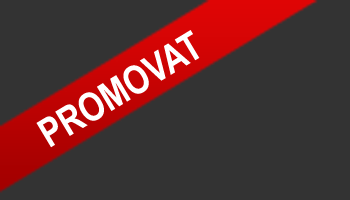
<style>
.page{position:relative;width:350px;height:200px;background:#333333}
.page>*{position:absolute;margin:0}
.t1{font:39.7px "ArialNarrow-Bold";color:#ffffff}
</style>
<div class="page">
<p class="t1" style="left:36px;top:30px;width:164px;height:118px;rotate:-31deg">PROMOVAT</p>
</div>
